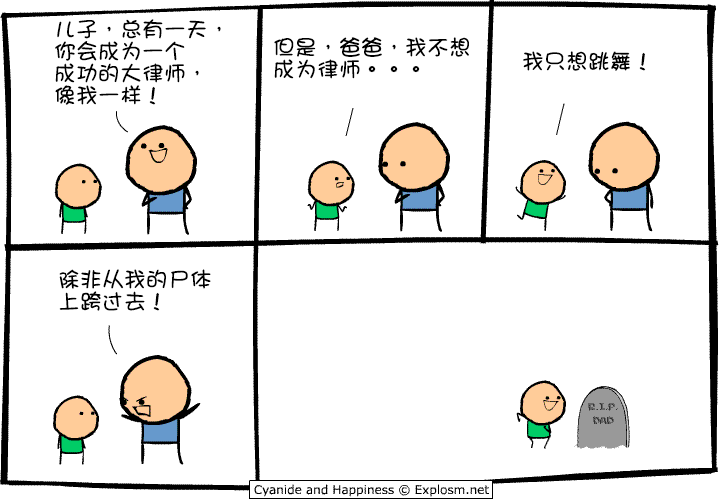
<style>
.page{position:relative;width:720px;height:500px;background:#ffffff}
.page>*{position:absolute;margin:0}
.t1{font:22px/22px "DFGirl";color:#000000}
.t2{font:22px "DFGirl";color:#000000}
</style>
<div class="page">
<p class="t1" style="left:55px;top:19px;width:166px;height:86px">儿子，总有一天，<br>你会成为一个<br>成功的大律师，<br>像我一样！</p>
<p class="t1" style="left:274px;top:37px;width:195px;height:42px">但是，爸爸，我不想<br>成为律师。。。</p>
<p class="t2" style="left:523px;top:51px;width:123px;height:20px">我只想跳舞！</p>
<p class="t1" style="left:59px;top:269px;width:152px;height:42px">除非从我的尸体<br>上跨过去！</p>
</div>
